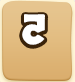
<style>
.page{position:relative;width:75px;height:82px}
.page>*{position:absolute;margin:0}
.t1{font:41px "Skranji-Bold";letter-spacing:0.02em;color:#ffffff}
</style>
<div class="page">
<p class="t1" style="left:22px;top:14px;width:23px;height:31px;rotate:180deg">5</p>
</div>
